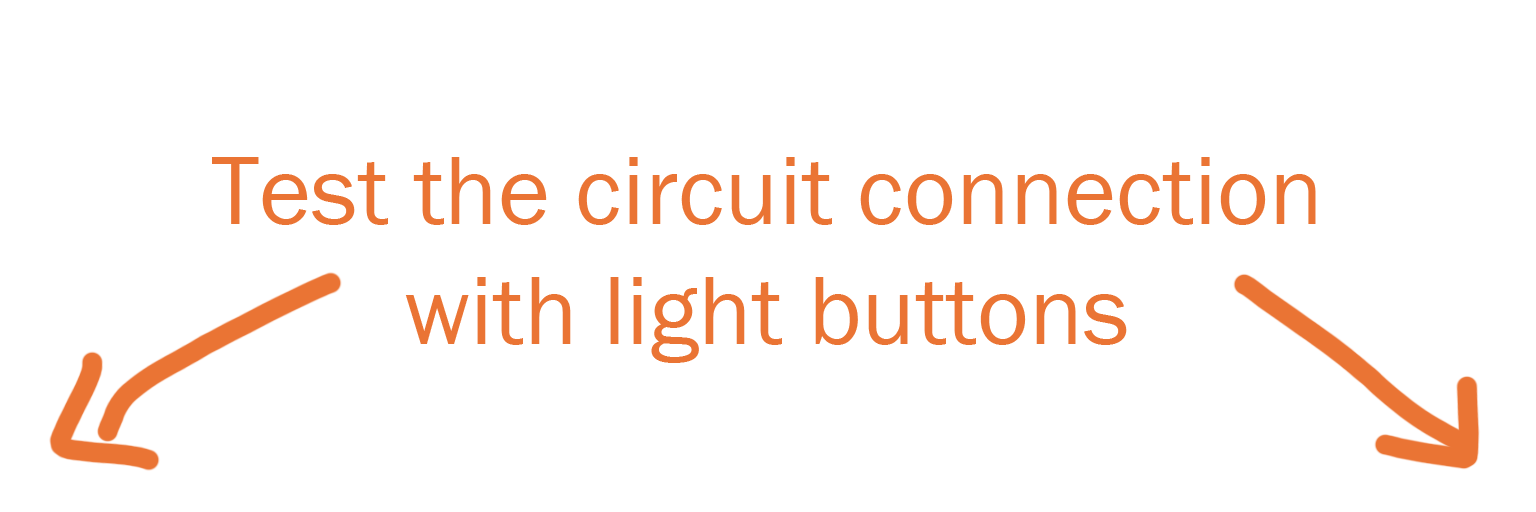
<style>
.page{position:relative;width:1536px;height:512px;background:#ffffff}
.page>*{position:absolute;margin:0}
.t1{font:100px "FranklinGothic-Book";color:#ea7434}
</style>
<div class="page">
<p class="t1" style="left:212px;top:157px;width:1104px;height:206px;text-align:center">Test the circuit connection<br>with light buttons</p>
</div>
